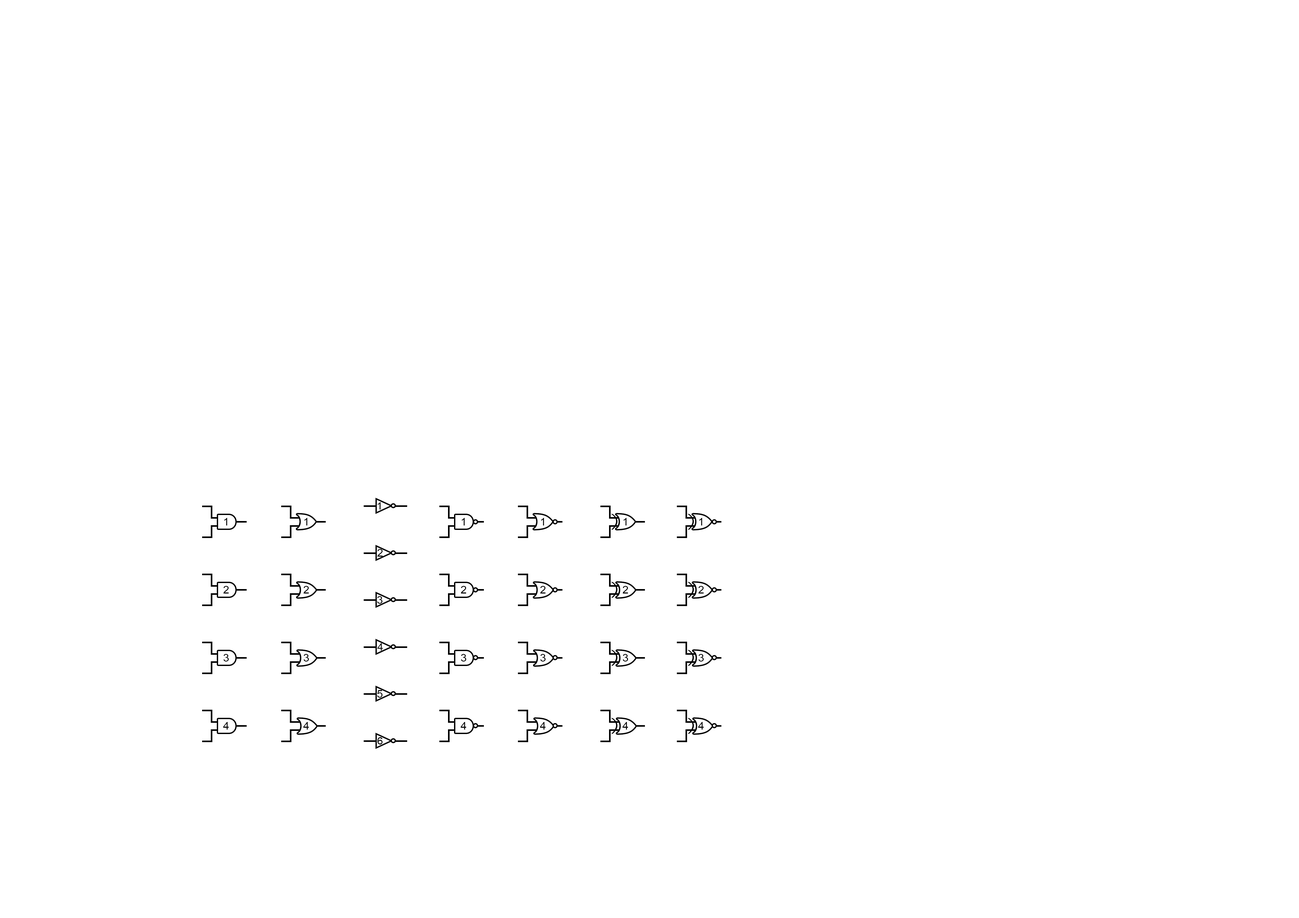
<style>
.page{position:relative;width:1299px;height:918px;background:#ffffff}
.page>*{position:absolute;margin:0}
.t1{font:10.1px "ArialMT";color:#000000;scale:1.06 1}
.t2{font:10.4px "ArialMT";color:#000000;scale:1.06 1}
</style>
<div class="page">
<p class="t1" style="left:377px;top:502px;width:4px;height:8px">1</p>
<p class="t2" style="left:224px;top:518px;width:3px;height:8px">1</p>
<p class="t2" style="left:304px;top:518px;width:3px;height:8px">1</p>
<p class="t2" style="left:461px;top:518px;width:4px;height:8px">1</p>
<p class="t2" style="left:541px;top:518px;width:3px;height:8px">1</p>
<p class="t2" style="left:623px;top:518px;width:3px;height:8px">1</p>
<p class="t2" style="left:699px;top:518px;width:3px;height:8px">1</p>
<p class="t2" style="left:377px;top:549px;width:6px;height:8px">2</p>
<p class="t2" style="left:223px;top:586px;width:6px;height:8px">2</p>
<p class="t2" style="left:303px;top:586px;width:6px;height:8px">2</p>
<p class="t2" style="left:461px;top:586px;width:5px;height:8px">2</p>
<p class="t2" style="left:540px;top:586px;width:6px;height:8px">2</p>
<p class="t2" style="left:622px;top:586px;width:6px;height:8px">2</p>
<p class="t2" style="left:698px;top:586px;width:6px;height:8px">2</p>
<p class="t2" style="left:377px;top:596px;width:5px;height:8px">3</p>
<p class="t1" style="left:377px;top:643px;width:6px;height:8px">4</p>
<p class="t2" style="left:223px;top:654px;width:6px;height:8px">3</p>
<p class="t2" style="left:303px;top:654px;width:6px;height:8px">3</p>
<p class="t2" style="left:461px;top:654px;width:5px;height:8px">3</p>
<p class="t2" style="left:540px;top:654px;width:6px;height:8px">3</p>
<p class="t2" style="left:622px;top:654px;width:6px;height:8px">3</p>
<p class="t2" style="left:698px;top:654px;width:6px;height:8px">3</p>
<p class="t2" style="left:377px;top:690px;width:5px;height:8px">5</p>
<p class="t2" style="left:223px;top:722px;width:6px;height:8px">4</p>
<p class="t2" style="left:303px;top:722px;width:6px;height:8px">4</p>
<p class="t2" style="left:460px;top:722px;width:6px;height:8px">4</p>
<p class="t2" style="left:540px;top:722px;width:6px;height:8px">4</p>
<p class="t2" style="left:622px;top:722px;width:6px;height:8px">4</p>
<p class="t2" style="left:698px;top:722px;width:6px;height:8px">4</p>
<p class="t1" style="left:377px;top:737px;width:5px;height:8px">6</p>
</div>
